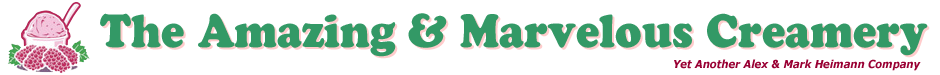
<style>
.page{position:relative;width:940px;height:75px;background:#ffffff}
.page>*{position:absolute;margin:0}
.t1{font:46.2px "CooperBlackStd";color:#339966;scale:0.91 1}
.t2{font:11px "Verdana-BoldItalic";color:#990033;scale:0.91 1}
</style>
<div class="page">
<p class="t1" style="left:100px;top:13px;width:828px;height:44px">The Amazing &amp; Marvelous Creamery</p>
<p class="t1" style="left:102px;top:15px;width:828px;height:44px">The Amazing &amp; Marvelous Creamery</p>
<p class="t2" style="left:674px;top:59px;width:247px;height:12px">Yet Another Alex &amp; Mark Heimann Company</p>
</div>
